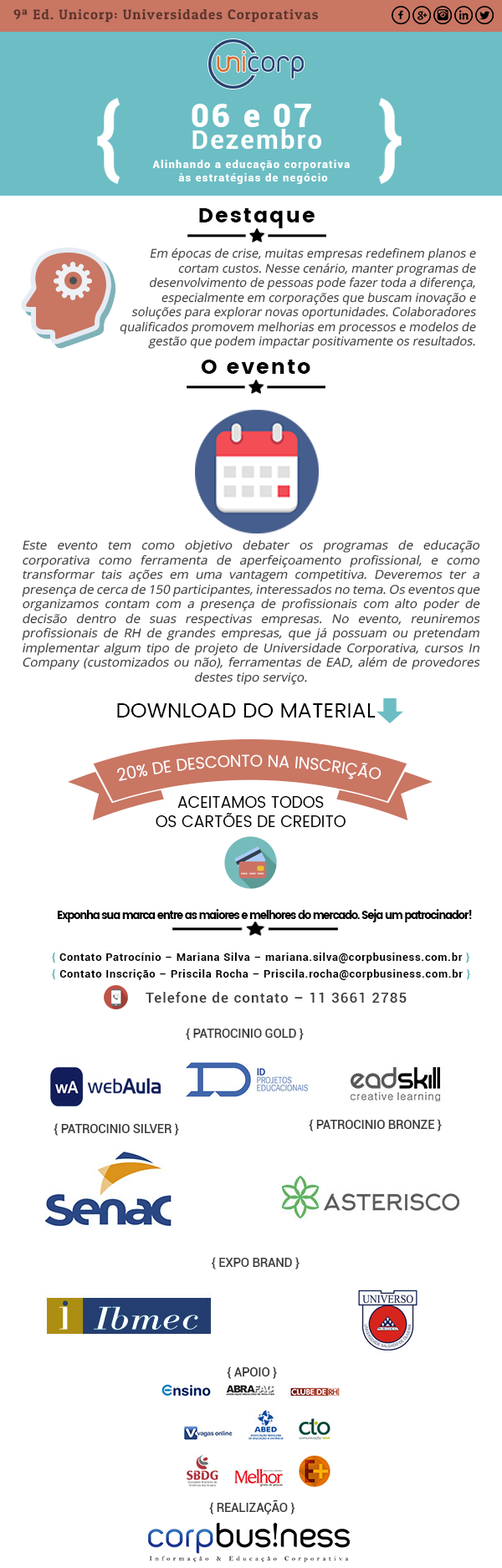
<style>
.page{position:relative;width:502px;height:1568px;background:#ffffff}
.page>*{position:absolute;margin:0}
.t1{font:13.9px "PatuaOne-Regular";letter-spacing:0.075em;color:#5a352d}
.t2{font:32px "Roboto-Black";letter-spacing:0.075em;color:#ffffff}
.t3{font:25.6px "Roboto-Bold";letter-spacing:0.075em;color:#ffffff}
.t4{font:11.2px "Roboto-Black";letter-spacing:0.075em;color:#ffffff}
.t5{font:20.9px "Poppins";letter-spacing:0.075em;color:#000000}
.t6{font:12.2px "OpenSans";color:#3b3b3b;font-style:italic}
.t7{font:12.2px "OpenSans";color:#3b3b3b;font-style:italic;scale:1.04 1}
.t8{font:20.9px "Poppins-Regular";color:#000000}
.t9{font:15.7px "Poppins-Regular";color:#ffffff}
.t10{font:15.7px "Poppins-Regular";color:#000000}
.t11{font:10.5px "Poppins";letter-spacing:-0.075em;color:#000000}
.t12{font:10.5px "Roboto-Bold";letter-spacing:0.075em;color:#000000}
.t13{font:10.5px "Roboto-Black";letter-spacing:0.075em;color:#6cbdc4}
.t14{font:13.9px "Roboto-Medium";letter-spacing:0.075em;color:#3b3b3b}
.t15{font:12.2px "Roboto-Medium";color:#3b3b3b}
</style>
<div class="page">
<p class="t1" style="left:13px;top:9px;width:305px;height:14px">9ª Ed. Unicorp: Universidades Corporativas</p>
<p class="t2" style="left:192px;top:104px;width:119px;height:23px">06 e 07</p>
<p class="t3" style="left:192px;top:129px;width:129px;height:20px">Dezembro</p>
<p class="t4" style="left:152px;top:160px;width:198px;height:24px;text-align:center">Alinhando a educação corporativa<br> às estratégias de negócio</p>
<p class="t5" style="left:199px;top:208px;width:115px;height:20px">Destaque</p>
<p class="t6" style="left:120px;top:248px;width:356px;height:101px;text-align:right">Em épocas de crise, muitas empresas redefinem planos e cortam custos. Nesse cenário, manter programas de desenvolvimento de pessoas pode fazer toda a diferença, especialmente em corporações que buscam inovação e soluções para explorar novas oportunidades. Colaboradores qualificados promovem melhorias em processos e modelos de gestão que podem impactar positivamente os resultados.</p>
<p class="t5" style="left:201px;top:360px;width:109px;height:14px">O evento</p>
<p class="t7" style="left:22px;top:539px;width:458px;height:146px;text-align:justify">Este evento tem como objetivo debater os programas de educação corporativa como ferramenta de aperfeiçoamento profissional, e como transformar tais ações em uma vantagem competitiva. Deveremos ter a presença de cerca de 150 participantes, interessados no tema. Os eventos que organizamos contam com a presença de profissionais com alto poder de decisão dentro de suas respectivas empresas. No evento, reuniremos profissionais de RH de grandes empresas, que já possuam ou pretendam implementar algum tipo de projeto de Universidade Corporativa, cursos In Company (customizados ou não), ferramentas de EAD, além de provedores destes tipo serviço.</p>
<p class="t8" style="left:117px;top:703px;width:258px;height:15px">DOWNLOAD DO MATERIAL</p>
<p class="t9" style="left:117px;top:754px;width:264px;height:27px;text-align:justify">20% DE DESCONTO NA INSCRIÇÃO</p>
<p class="t10" style="left:156px;top:796px;width:189px;height:31px;text-align:justify">ACEITAMOS TODOS <br>OS CARTÕES DE CREDITO</p>
<p class="t11" style="left:57px;top:909px;width:415px;height:13px">Exponha sua marca entre as maiores e melhores do mercado. Seja um patrocinador!</p>
<p class="t12" style="left:52px;top:953px;width:418px;height:10px"><span class="t13">{ </span>Contato Patrocínio – Mariana Silva – mariana.silva@corpbusiness.com.br <span class="t13">}</span></p>
<p class="t12" style="left:52px;top:969px;width:418px;height:11px"><span class="t13">{ </span>Contato Inscrição – Priscila Rocha – Priscila.rocha@corpbusiness.com.br<span class="t13"> }</span></p>
<p class="t14" style="left:146px;top:992px;width:260px;height:11px">Telefone de contato – 11 3661 2785</p>
<p class="t15" style="left:186px;top:1028px;width:118px;height:12px">{ PATROCINIO GOLD }</p>
<p class="t15" style="left:309px;top:1119px;width:133px;height:12px">{ PATROCINIO BRONZE }</p>
<p class="t15" style="left:54px;top:1123px;width:125px;height:13px">{ PATROCINIO SILVER }</p>
<p class="t15" style="left:212px;top:1257px;width:87px;height:12px">{ EXPO BRAND }</p>
<p class="t15" style="left:227px;top:1366px;width:50px;height:13px">{ APOIO }</p>
<p class="t15" style="left:209px;top:1500px;width:86px;height:14px">{ REALIZAÇÃO }</p>
</div>
